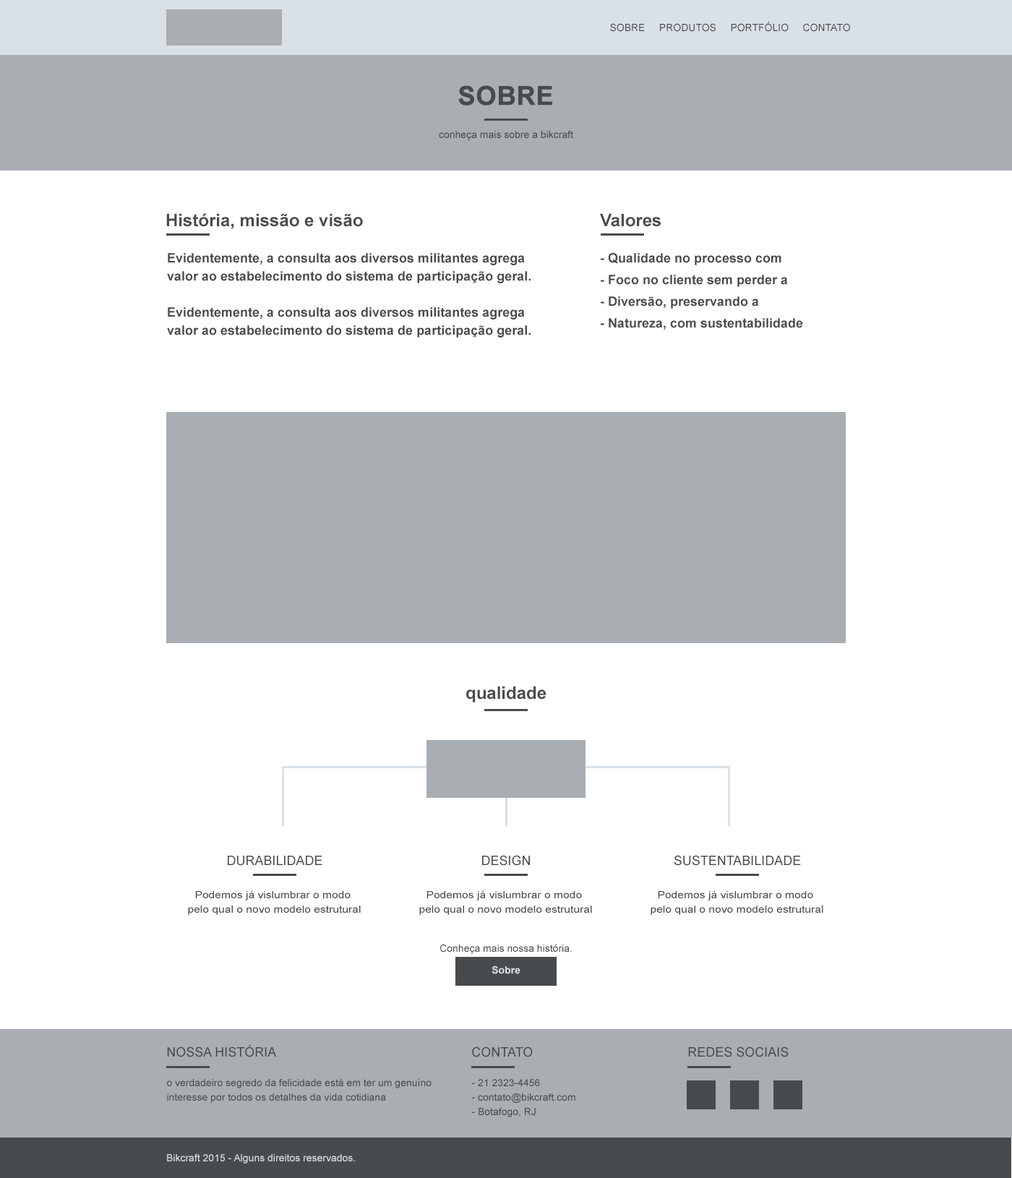
<style>
.page{position:relative;width:1012px;height:1178px;background:#ffffff}
.page>*{position:absolute;margin:0}
.t1{font:10.1px "ArialMT";color:#484b4d;text-transform:uppercase}
.t2{font:26px "Arial-BoldMT";color:#484b4d;text-transform:uppercase;font-weight:bold}
.t3{font:10.1px "ArialMT";color:#484b4d}
.t4{font:17.3px "Arial-BoldMT";color:#484b4d}
.t5{font:13px/18.1px "Arial-BoldMT";color:#484b4d}
.t6{font:13px/21.7px "Arial-BoldMT";color:#484b4d}
.t7{font:13px "ArialMT";color:#484b4d;text-transform:uppercase}
.t8{font:10.1px/14.5px "ArialMT";color:#484b4d;scale:1.12 1}
.t9{font:10.1px "Arial-BoldMT";color:#d9e0e6}
.t10{font:10.1px/14.5px "ArialMT";color:#484b4d}
.t11{font:10.1px "ArialMT";color:#d9e0e6}
</style>
<div class="page">
<p class="t1" style="left:610px;top:22px;width:240px;height:10px">Sobre     Produtos     PORTFÓLIO     Contato</p>
<p class="t2" style="left:458px;top:85px;width:94px;height:21px">sobre</p>
<p class="t3" style="left:439px;top:131px;width:134px;height:9px">conheça mais sobre a bikcraft</p>
<p class="t4" style="left:166px;top:213px;width:197px;height:16px">História, missão e visão</p>
<p class="t4" style="left:600px;top:213px;width:61px;height:14px">Valores</p>
<p class="t5" style="left:167px;top:253px;width:364px;height:85px">Evidentemente, a consulta aos diversos militantes agrega valor ao estabelecimento do sistema de participação geral.<br><br>Evidentemente, a consulta aos diversos militantes agrega valor ao estabelecimento do sistema de participação geral.</p>
<p class="t6" style="left:601px;top:253px;width:202px;height:77px">- Qualidade no processo com<br>- Foco no cliente sem perder a<br>- Diversão, preservando a <br>- Natureza, com sustentabilidade</p>
<p class="t4" style="left:466px;top:686px;width:80px;height:17px">qualidade</p>
<p class="t7" style="left:228px;top:856px;width:94px;height:10px">durabilidade</p>
<p class="t7" style="left:482px;top:855px;width:48px;height:11px">DESIGN</p>
<p class="t7" style="left:674px;top:855px;width:127px;height:11px">SUSTENTABILIDADE</p>
<p class="t8" style="left:188px;top:891px;width:173px;height:24px;text-align:center">Podemos já vislumbrar o modo <br>pelo qual o novo modelo estrutural</p>
<p class="t8" style="left:419px;top:891px;width:173px;height:24px;text-align:center">Podemos já vislumbrar o modo <br>pelo qual o novo modelo estrutural</p>
<p class="t8" style="left:651px;top:891px;width:172px;height:24px;text-align:center">Podemos já vislumbrar o modo <br>pelo qual o novo modelo estrutural</p>
<p class="t3" style="left:440px;top:944px;width:132px;height:10px">Conheça mais nossa história.</p>
<p class="t9" style="left:492px;top:966px;width:28px;height:8px">Sobre</p>
<p class="t7" style="left:167px;top:1045px;width:109px;height:13px">Nossa história</p>
<p class="t7" style="left:472px;top:1047px;width:61px;height:11px">contato</p>
<p class="t7" style="left:688px;top:1047px;width:101px;height:11px">redes sociais</p>
<p class="t10" style="left:167px;top:1079px;width:265px;height:24px">o verdadeiro segredo da felicidade está em ter um genuíno interesse por todos os detalhes da vida cotidiana</p>
<p class="t10" style="left:471px;top:1079px;width:104px;height:39px">- 21 2323-4456<br>- contato@bikcraft.com<br>- Botafogo, RJ</p>
<p class="t11" style="left:167px;top:1154px;width:188px;height:10px">Bikcraft 2015 - Alguns direitos reservados.</p>
</div>
